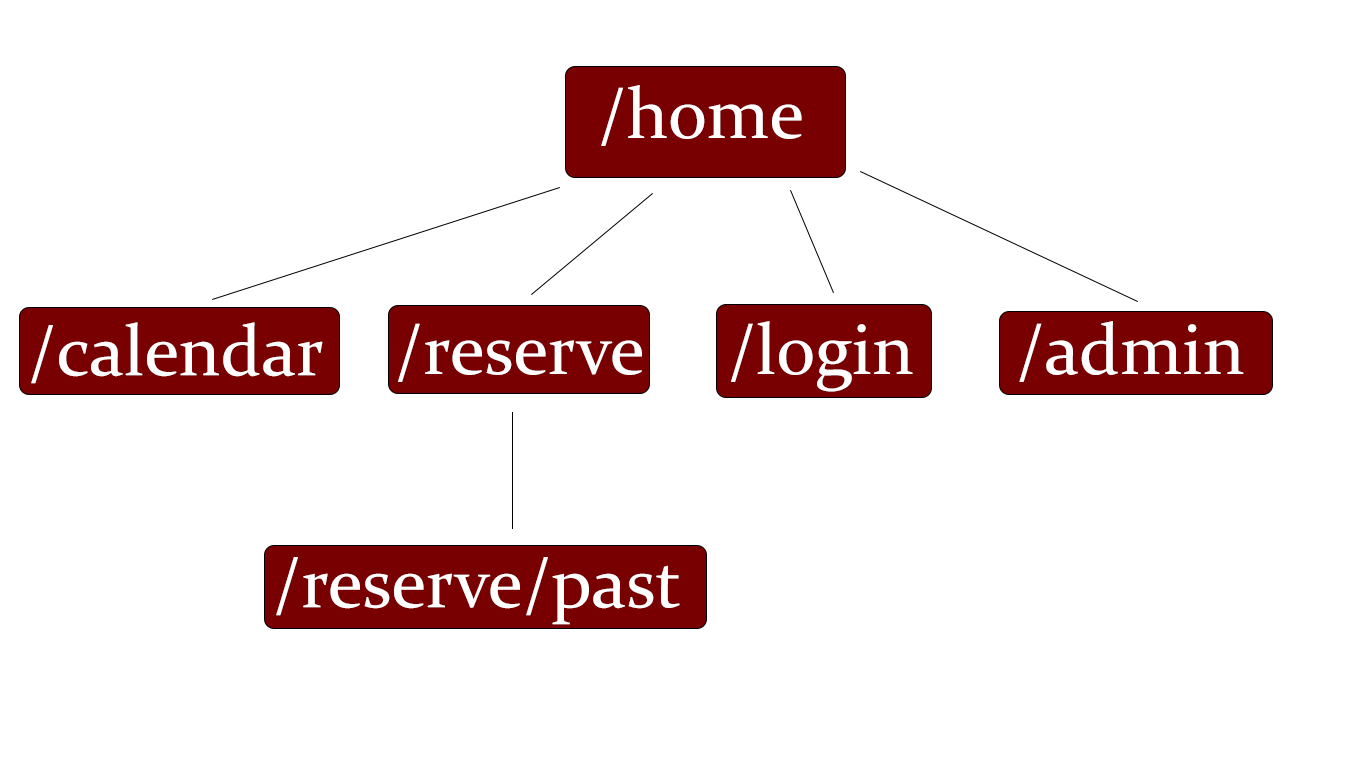
<style>
.page{position:relative;width:1366px;height:768px;background:#ffffff}
.page>*{position:absolute;margin:0}
.t1{font:72px "Constantia";color:#ffffff}
</style>
<div class="page">
<p class="t1" style="left:601px;top:85px;width:201px;height:61px">/home</p>
<p class="t1" style="left:31px;top:322px;width:292px;height:62px">/calendar</p>
<p class="t1" style="left:398px;top:323px;width:244px;height:59px">/reservee</p>
<p class="t1" style="left:731px;top:321px;width:182px;height:71px">/login</p>
<p class="t1" style="left:1019px;top:321px;width:225px;height:61px">/admin</p>
<p class="t1" style="left:276px;top:557px;width:404px;height:68px">/reserve/past</p>
</div>
